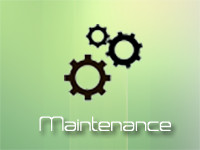
<style>
.page{position:relative;width:200px;height:150px}
.page>*{position:absolute;margin:0}
.t1{font:18px "Neogrey";color:#ffffff}
</style>
<div class="page">
<p class="t1" style="left:39px;top:116px;width:132px;height:15px">Maintenance</p>
</div>
